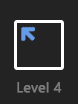
<style>
.page{position:relative;width:78px;height:104px;background:#232323}
.page>*{position:absolute;margin:0}
.t1{font:14px "SegoeUI";color:#7c7c7c;font-weight:bold}
</style>
<div class="page">
<p class="t1" style="left:17px;top:82px;width:45px;height:11px">Level 4</p>
</div>
